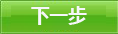
<style>
.page{position:relative;width:118px;height:34px}
.page>*{position:absolute;margin:0}
.t1{font:18.7px "MicrosoftYaHei-Bold";color:#f5f6f9}
.t2{font:13.3px "MicrosoftYaHei";color:#6e6f71}
</style>
<div class="page">
<p class="t1" style="left:31px;top:6px;width:56px;height:19px"><span class="t2"> </span>下一步</p>
</div>
